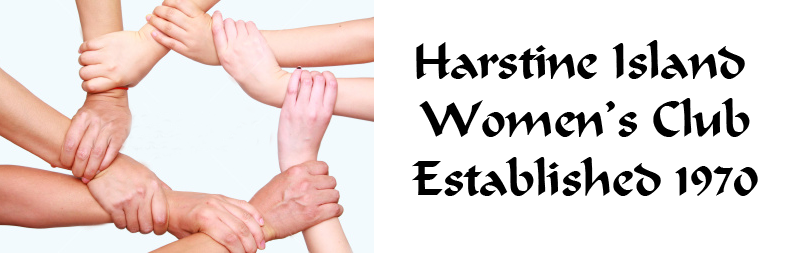
<style>
.page{position:relative;width:800px;height:253px;background:#ffffff}
.page>*{position:absolute;margin:0}
.t1{font:48.6px "Calligrapher-Regular";color:#000000}
</style>
<div class="page">
<p class="t1" style="left:412px;top:40px;width:346px;height:156px;text-align:center">Harstine Island <br>Women’s Club<br>Established 1970</p>
</div>
